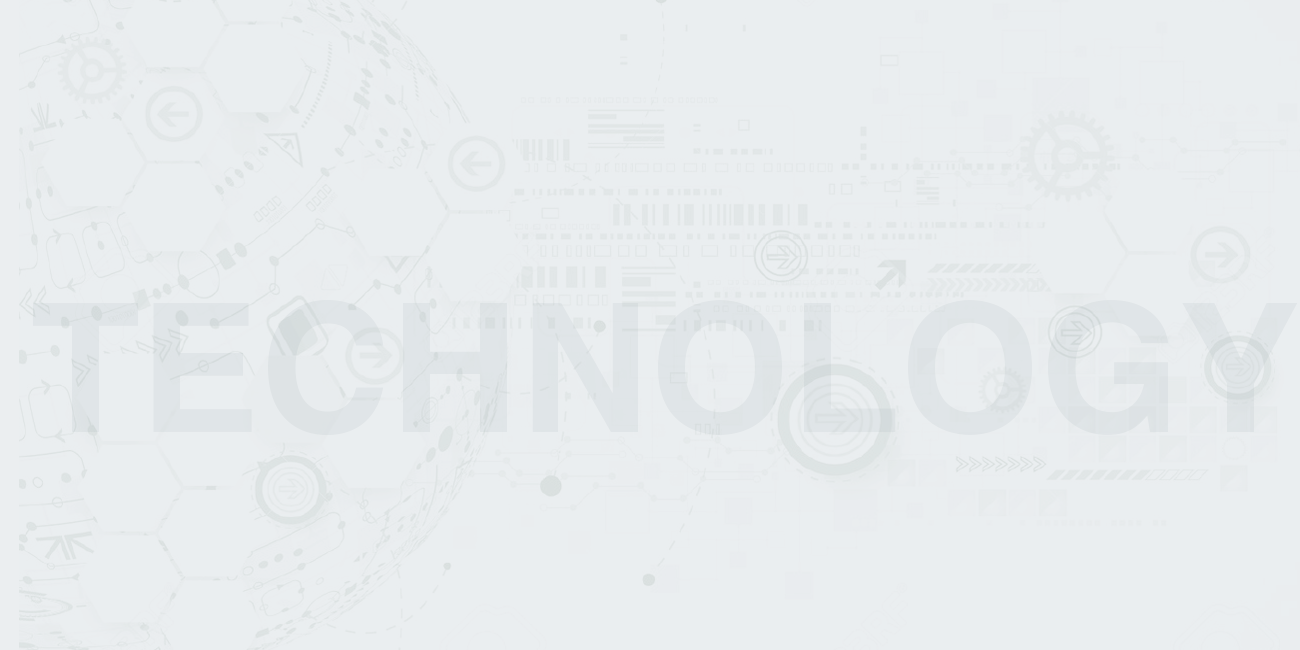
<style>
.page{position:relative;width:1300px;height:650px;background:#eaeef0}
.page>*{position:absolute;margin:0}
.t1{font:180px "HelveticaCE-Bold";color:#e0e5e8;text-transform:uppercase}
</style>
<div class="page">
<p class="t1" style="left:32px;top:299px;width:1266px;height:137px">technology</p>
</div>
